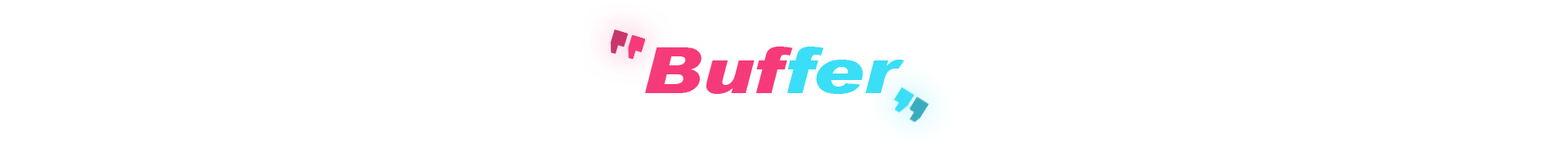
<style>
.page{position:relative;width:1568px;height:147px;background:#ffffff}
.page>*{position:absolute;margin:0}
.t1{font:63.7px "Arial-BlackItalic";color:#f63a79;scale:1.2 1}
.t2{font:63.7px "Arial-BlackItalic";color:#3adef6;scale:1.2 1}
</style>
<div class="page">
<p class="t1" style="left:645px;top:47px;width:259px;height:47px">Buf<span class="t2">fer</span></p>
</div>
